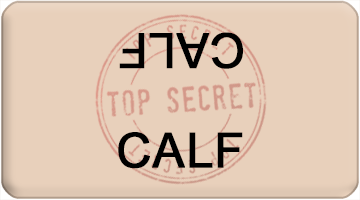
<style>
.page{position:relative;width:360px;height:200px;background:#e8d0bb}
.page>*{position:absolute;margin:0}
.t1{font:48px "ArialMT";color:#000000;font-weight:bold}
</style>
<div class="page">
<p class="t1" style="left:119px;top:32px;width:124px;height:37px;rotate:180deg">CALF</p>
<p class="t1" style="left:118px;top:132px;width:125px;height:37px">CALF</p>
</div>
